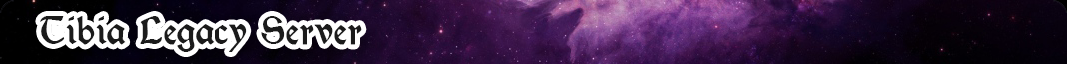
<style>
.page{position:relative;width:1067px;height:64px}
.page>*{position:absolute;margin:0}
.t1{font:42.7px "MorrisRoman-Black";color:#1b1b1b}
</style>
<div class="page">
<p class="t1" style="left:40px;top:16px;width:322px;height:36px">Tibia Legacy Server</p>
</div>
